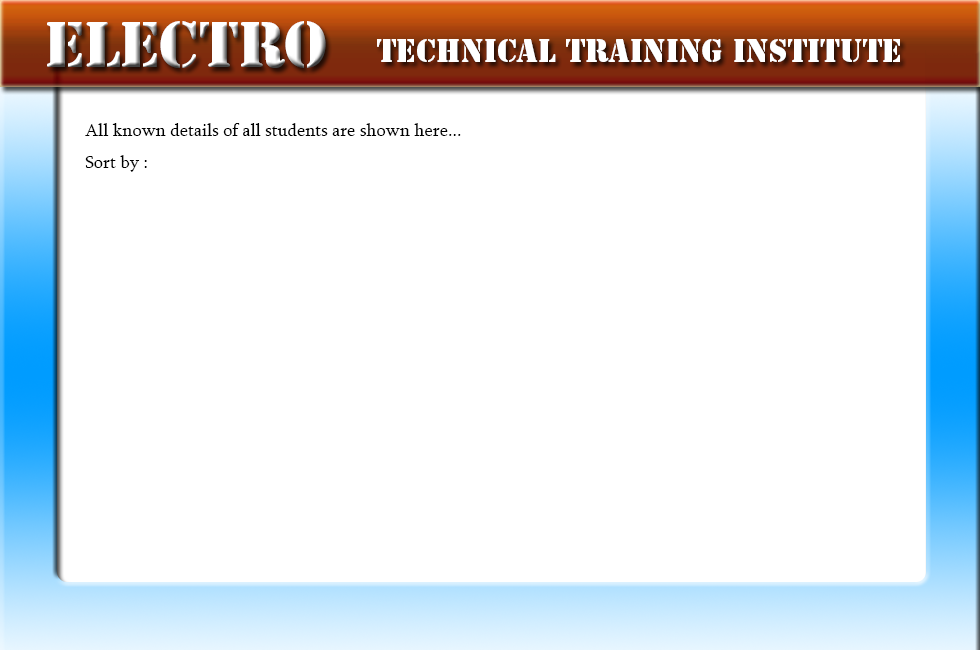
<style>
.page{position:relative;width:980px;height:650px;background:#ffffff}
.page>*{position:absolute;margin:0}
.t1{font:60px "StencilStd";color:#ffffff}
.t2{font:30px "StencilStd";color:#ffffff}
.t3{font:18px "Sylfaen";color:#000000}
</style>
<div class="page">
<p class="t1" style="left:47px;top:21px;width:279px;height:47px">Electro</p>
<p class="t2" style="left:377px;top:39px;width:523px;height:23px">Technical Training Institute</p>
<p class="t3" style="left:85px;top:123px;width:376px;height:13px">All known details of all students are shown here...</p>
<p class="t3" style="left:85px;top:155px;width:62px;height:17px">Sort by :</p>
</div>
